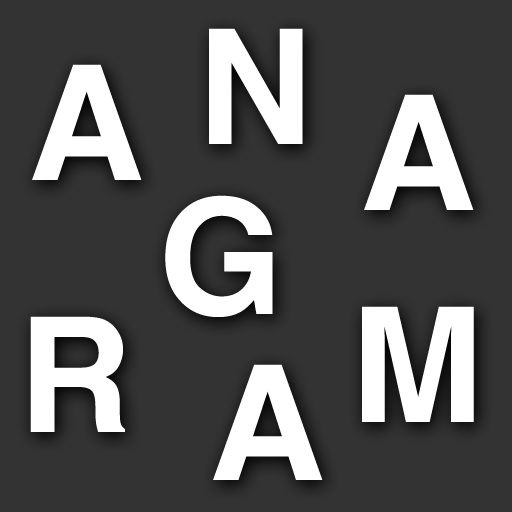
<style>
.page{position:relative;width:512px;height:512px;background:#333333}
.page>*{position:absolute;margin:0}
.t1{font:160px "Helvetica-Bold";color:#ffffff}
</style>
<div class="page">
<p class="t1" style="left:209px;top:28px;width:94px;height:116px">N</p>
<p class="t1" style="left:32px;top:64px;width:110px;height:116px">A</p>
<p class="t1" style="left:364px;top:94px;width:110px;height:116px">A</p>
<p class="t1" style="left:165px;top:195px;width:108px;height:122px">G</p>
<p class="t1" style="left:30px;top:316px;width:95px;height:116px">R</p>
<p class="t1" style="left:362px;top:306px;width:112px;height:116px">M</p>
<p class="t1" style="left:213px;top:364px;width:110px;height:116px">A</p>
</div>
